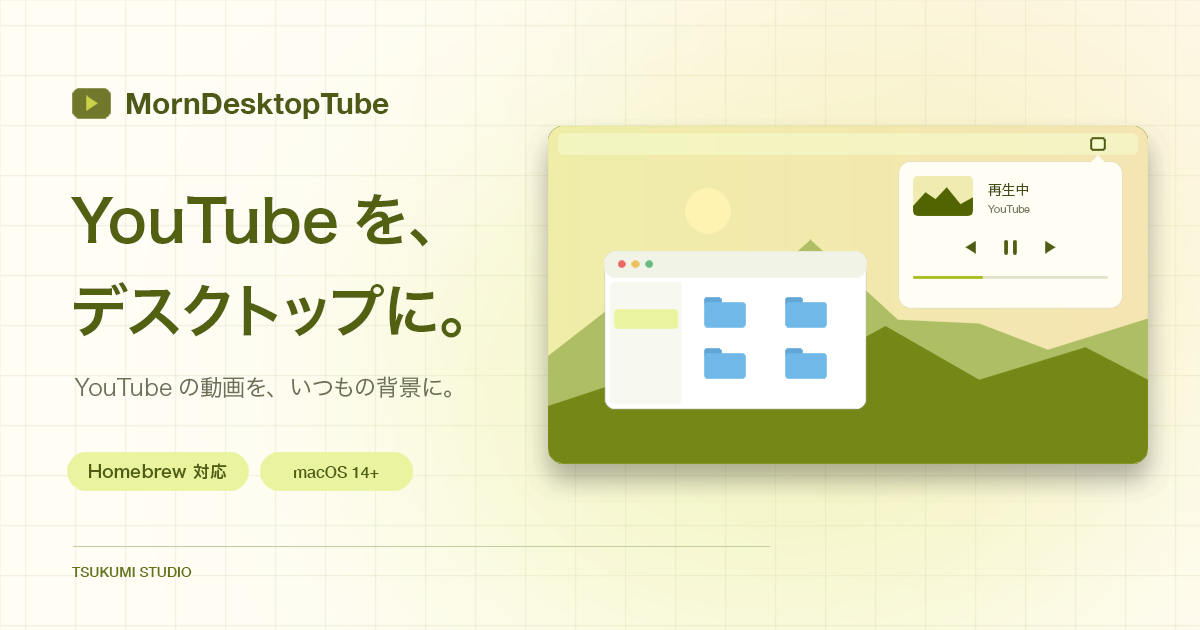
<style>
.page{position:relative;width:1200px;height:630px}
.page>*{position:absolute;margin:0}
.t1{font:30px "HelveticaNeue-Bold";color:#4c5a15}
.t2{font:13.8px "HiraginoSans-W3";color:#424e16}
.t3{font:58px "HiraginoSans-W6";color:#526011}
.t4{font:10px "HiraginoSans-W3";color:#777d61}
.t5{font:23px "HiraginoSans-W3";color:#6c7057}
.t6{font:17px "HiraginoSans-W6";color:#4e5c14}
.t7{font:16px "HelveticaNeue-Medium";color:#4e5c14}
.t8{font:14px "HelveticaNeue-Medium";color:#637412}
</style>
<div class="page">
<p class="t1" style="left:127px;top:93px;width:262px;height:26px">MornDesktopTube</p>
<p class="t2" style="left:988px;top:183px;width:40px;height:14px">再生中</p>
<p class="t3" style="left:70px;top:194px;width:358px;height:53px">YouTubeを、</p>
<p class="t4" style="left:987px;top:205px;width:43px;height:8px">YouTube</p>
<p class="t3" style="left:74px;top:282px;width:387px;height:56px">デスクトップに。</p>
<p class="t5" style="left:74px;top:376px;width:377px;height:22px">YouTubeの動画を、いつもの背景に。</p>
<p class="t6" style="left:89px;top:463px;width:138px;height:17px">Homebrew 対応</p>
<p class="t7" style="left:294px;top:466px;width:85px;height:12px">macOS 14+</p>
<p class="t8" style="left:72px;top:567px;width:120px;height:10px">TSUKUMI STUDIO</p>
</div>
